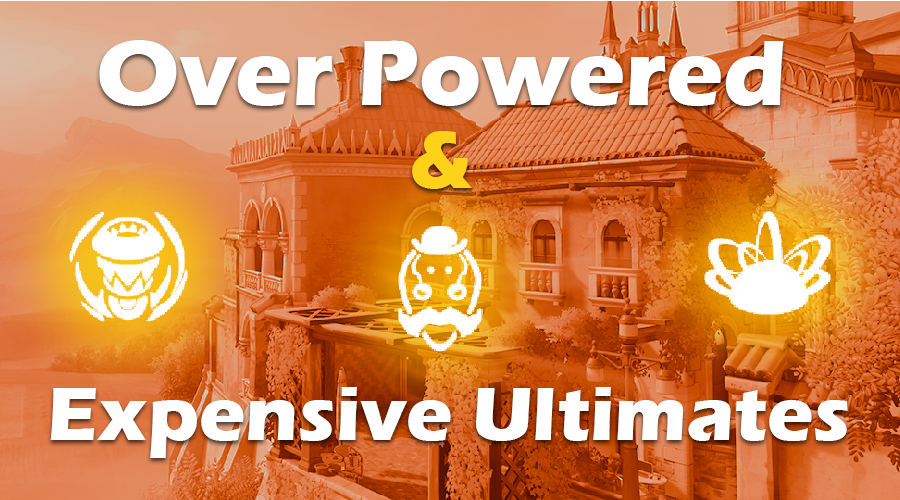
<style>
.page{position:relative;width:900px;height:500px}
.page>*{position:absolute;margin:0}
.t1{font:96px "ErasITC-Bold";color:#ffffff}
.t2{font:84px "ErasITC-Bold";color:#ffd118}
.t3{font:78px "ErasITC-Bold";color:#ffffff}
</style>
<div class="page">
<p class="t1" style="left:99px;top:40px;width:685px;height:66px">Over Powered</p>
<p class="t2" style="left:412px;top:131px;width:60px;height:58px">&amp;</p>
<p class="t3" style="left:50px;top:387px;width:798px;height:71px">Expensive Ultimates</p>
</div>
